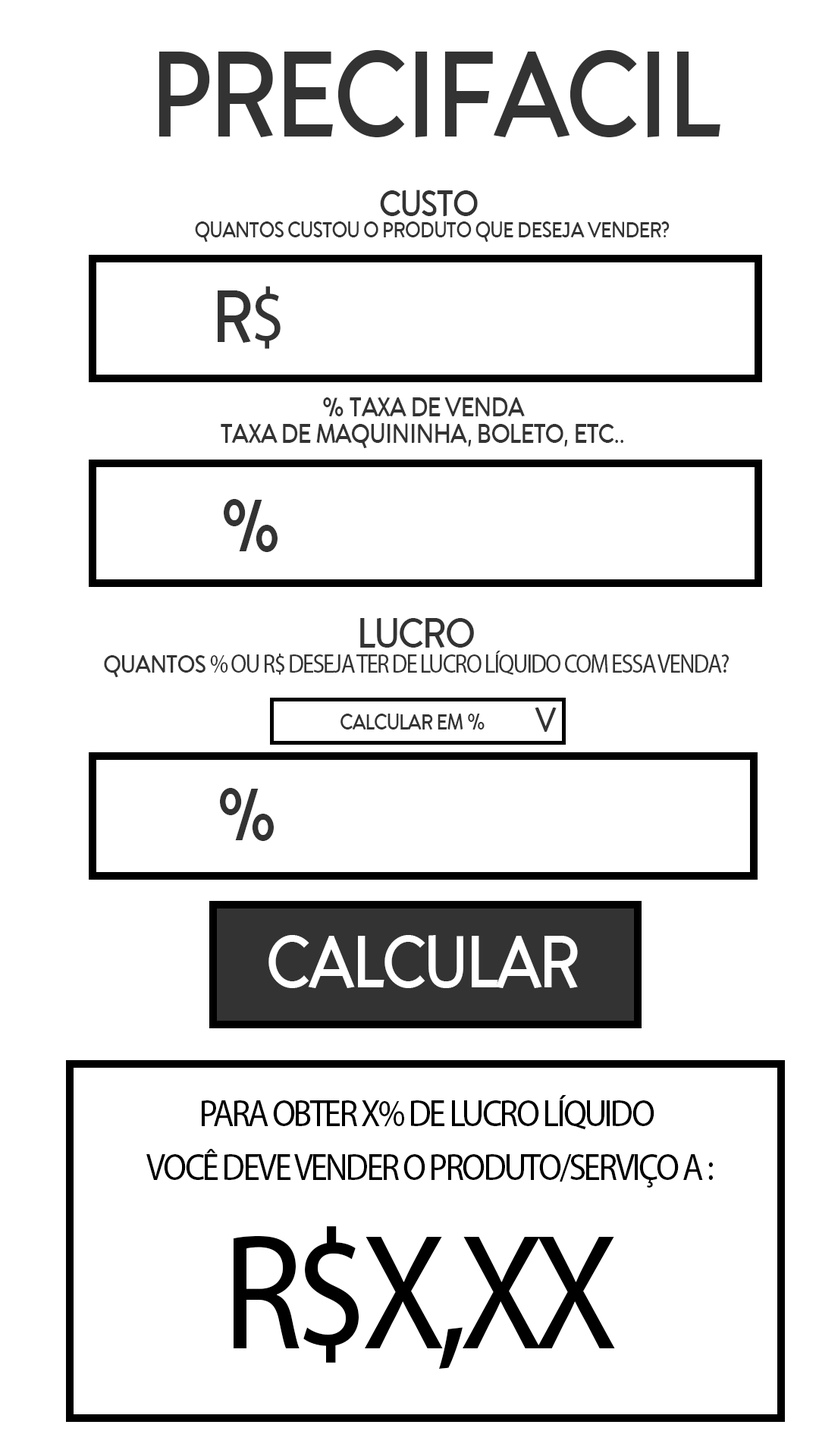
<style>
.page{position:relative;width:819px;height:1456px;background:#ffffff}
.page>*{position:absolute;margin:0}
.t1{font:125.3px "AronGrotesque-Regular";letter-spacing:-0.06em;color:#333333;text-transform:uppercase;scale:0.9 1}
.t2{font:22.7px/21.1px "AronGrotesque-Regular";letter-spacing:-0.06em;color:#333333;text-transform:uppercase;scale:0.9 1}
.t3{font:37.9px/36.3px "AronGrotesque-Regular";letter-spacing:-0.06em;color:#333333;text-transform:uppercase;scale:0.9 1}
.t4{font:75.8px "AronGrotesque-Regular";letter-spacing:-0.06em;color:#333333;text-transform:uppercase;scale:0.9 1}
.t5{font:75.8px "MyriadPro-Regular";letter-spacing:-0.06em;color:#333333;text-transform:uppercase;scale:0.9 1}
.t6{font:27.8px/26.6px "AronGrotesque-Regular";letter-spacing:-0.06em;color:#333333;text-transform:uppercase;scale:0.9 1}
.t7{font:26.2px/24.3px "MyriadPro-Regular";letter-spacing:-0.06em;color:#333333;text-transform:uppercase;scale:0.9 1}
.t8{font:43.6px/41.7px "AronGrotesque-Regular";letter-spacing:-0.06em;color:#333333;text-transform:uppercase;scale:0.9 1}
.t9{font:26.2px/24.3px "AronGrotesque-Regular";letter-spacing:-0.06em;color:#333333;text-transform:uppercase;scale:0.9 1}
.t10{font:22.5px "AronGrotesque-Regular";letter-spacing:-0.06em;color:#333333;text-transform:uppercase;scale:0.9 1}
.t11{font:35.8px "AronGrotesque-Regular";letter-spacing:-0.06em;color:#333333;text-transform:uppercase;scale:0.9 1}
.t12{font:75.8px "AronGrotesque-Regular";letter-spacing:-0.06em;color:#ffffff;text-transform:uppercase;scale:0.9 1}
.t13{font:37.9px/53.8px "MyriadPro-Regular";letter-spacing:-0.06em;color:#000000;text-transform:uppercase;scale:0.9 1}
.t14{font:165.8px "MyriadPro-Regular";letter-spacing:-0.06em;color:#000000;text-transform:uppercase;scale:0.9 1}
</style>
<div class="page">
<p class="t1" style="left:158px;top:50px;width:562px;height:87px">precifacil</p>
<p class="t2" style="left:195px;top:190px;width:475px;height:52px;text-align:center"><span class="t3">custo <br></span>quantos custou o produto que deseja vender?</p>
<p class="t4" style="left:218px;top:286px;width:63px;height:63px">R<span class="t5">$</span></p>
<p class="t6" style="left:221px;top:397px;width:402px;height:51px;text-align:center">% taxa de venda<br>taxa de maquininha, boleto, etc..</p>
<p class="t4" style="left:224px;top:499px;width:54px;height:53px">%</p>
<p class="t7" style="left:104px;top:618px;width:625px;height:59px;text-align:center"><span class="t8">lucro<br></span><span class="t9">quantos </span>% ou R$ deseja ter de lucro líquido com essa venda?</p>
<p class="t10" style="left:340px;top:714px;width:145px;height:16px">calcular em %</p>
<p class="t11" style="left:535px;top:708px;width:22px;height:24px">v</p>
<p class="t4" style="left:220px;top:788px;width:54px;height:53px">%</p>
<p class="t12" style="left:268px;top:935px;width:310px;height:53px">calcular</p>
<p class="t13" style="left:146px;top:1095px;width:567px;height:93px;text-align:center">para obter x% de lucro líquido <br>você deve vender o produto/serviço a :</p>
<p class="t14" style="left:234px;top:1226px;width:381px;height:143px">R$x,xx</p>
</div>
